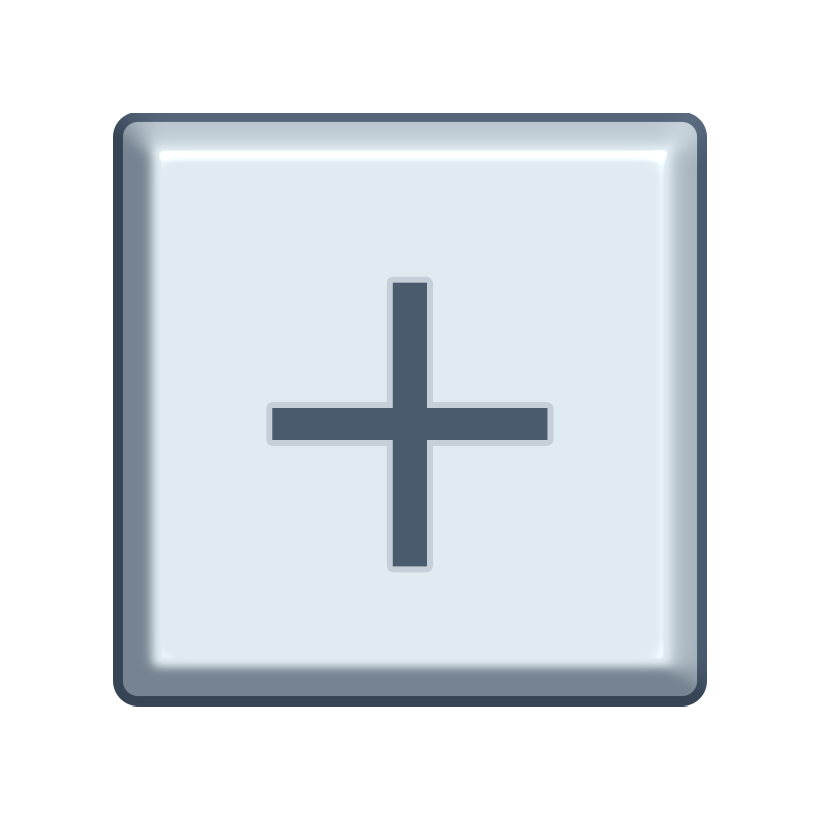
<style>
.page{position:relative;width:820px;height:819px;background:#ffffff}
.page>*{position:absolute;margin:0}
.t1{font:533.3px "MyriadPro-Regular";color:#4b5b6e}
</style>
<div class="page">
<p class="t1" style="left:272px;top:282px;width:276px;height:285px">+</p>
</div>
